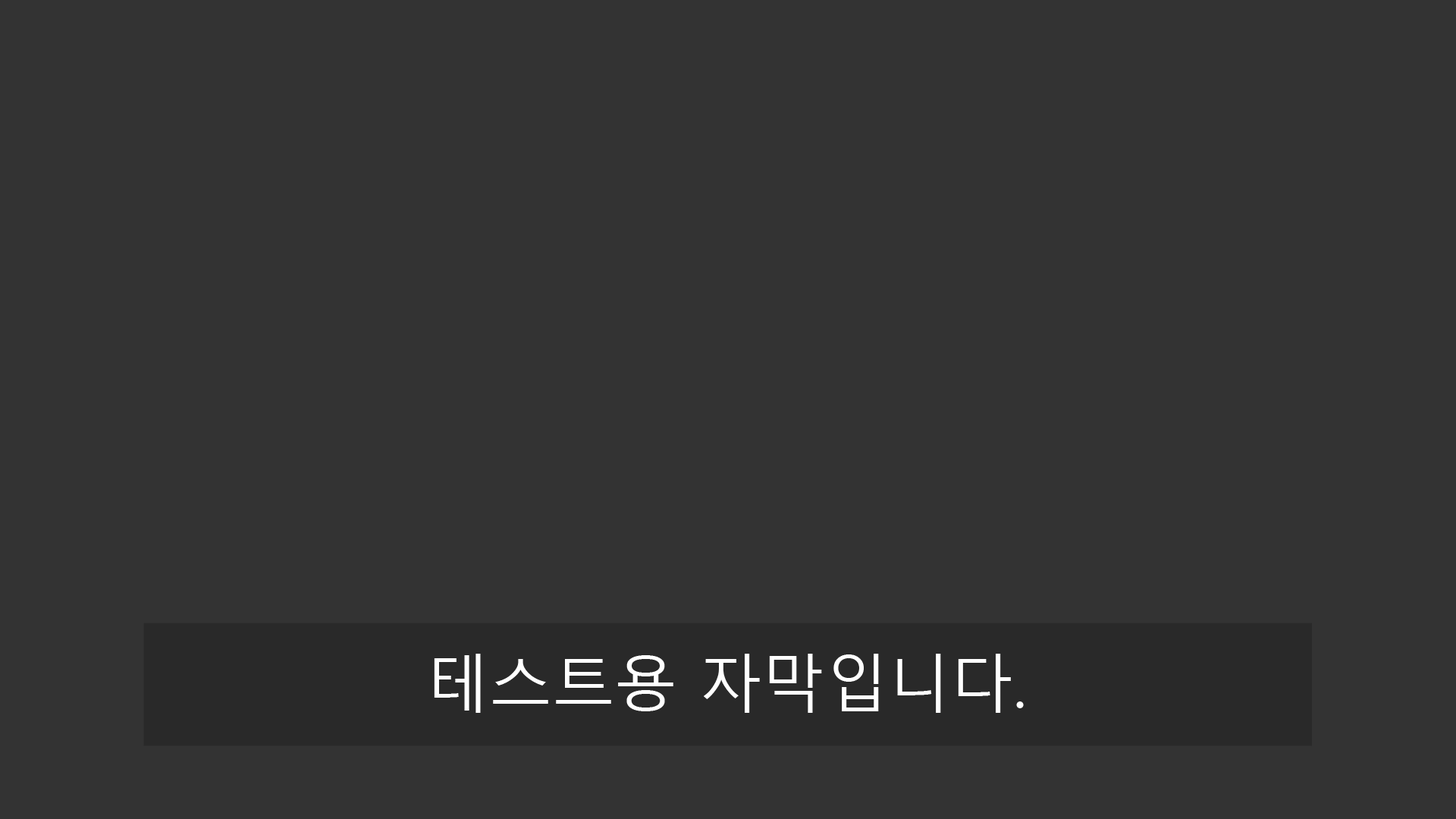
<style>
.page{position:relative;width:1456px;height:819px;background:#333333}
.page>*{position:absolute;margin:0}
.t1{font:62.7px "MalgunGothic";color:#ffffff}
</style>
<div class="page">
<p class="t1" style="left:434px;top:654px;width:590px;height:59px">테스트용 자막입니다.</p>
</div>
